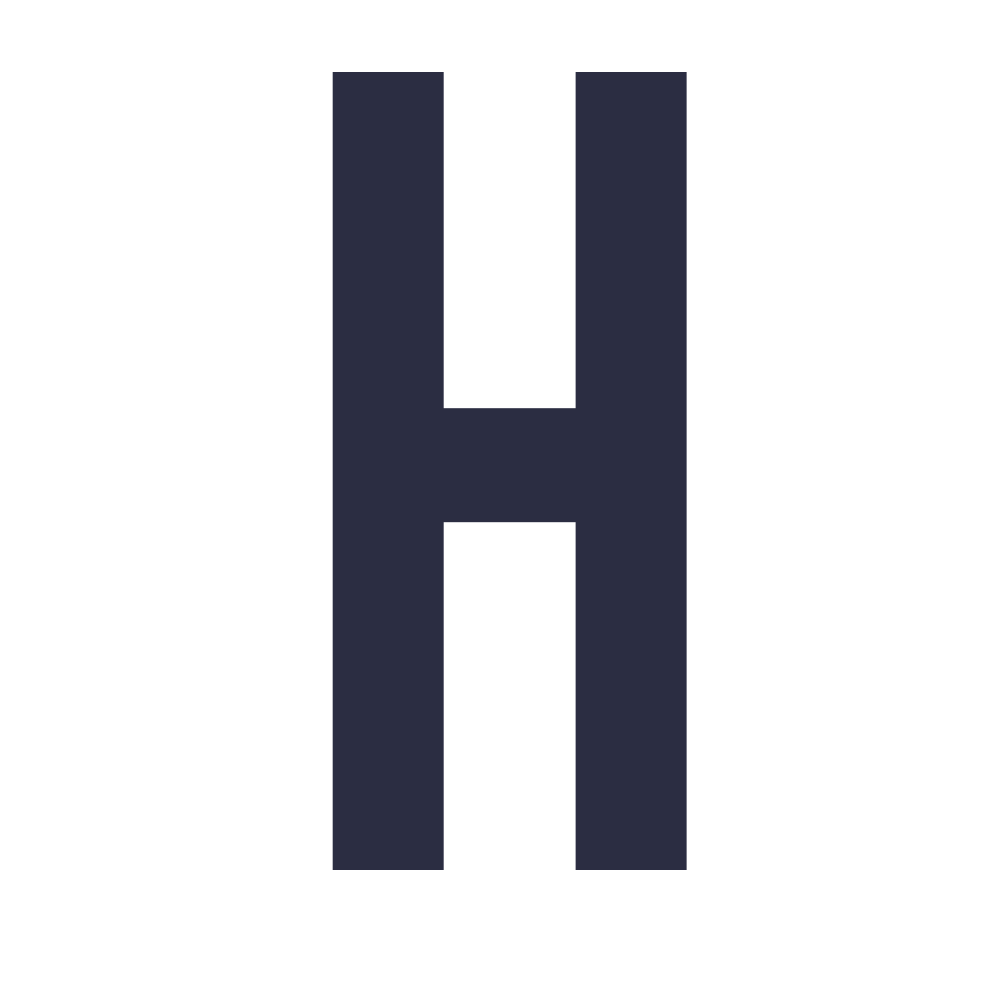
<style>
.page{position:relative;width:1000px;height:1000px;background:#ffffff}
.page>*{position:absolute;margin:0}
.t1{font:1140.2px "Bebas-Regular";color:#2b2d42;scale:0.92 1}
</style>
<div class="page">
<p class="t1" style="left:332px;top:72px;width:355px;height:798px">H</p>
</div>
